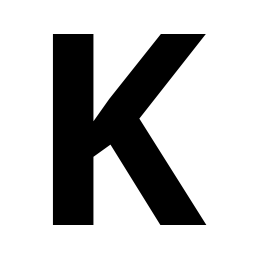
<style>
.page{position:relative;width:260px;height:260px;background:#ffffff}
.page>*{position:absolute;margin:0}
.t1{font:266.7px "NotoSans-Bold";color:#000000}
</style>
<div class="page">
<p class="t1" style="left:52px;top:34px;width:155px;height:191px">K</p>
</div>
